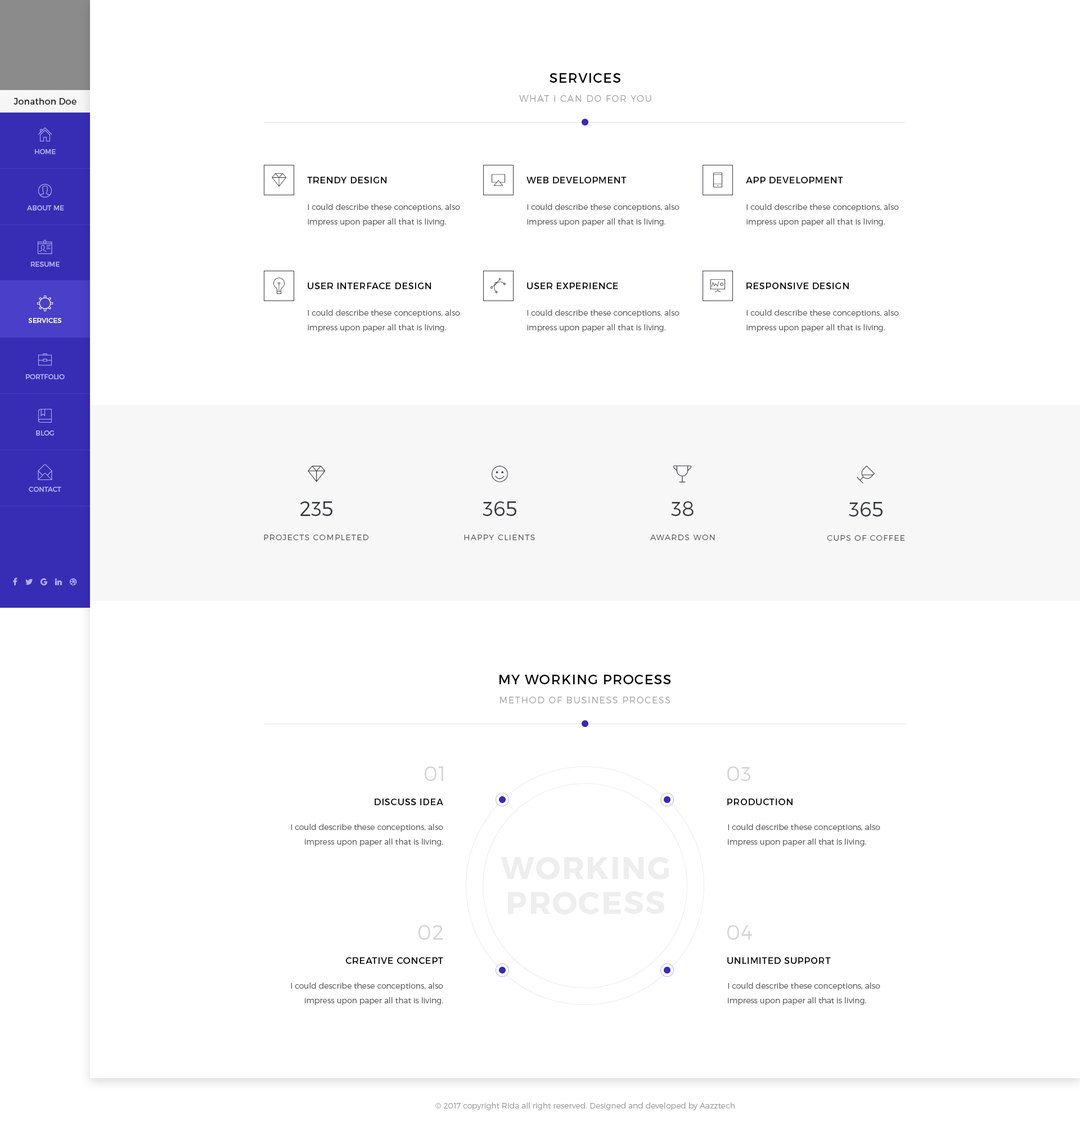
<style>
.page{position:relative;width:1080px;height:1135px;background:#ffffff}
.page>*{position:absolute;margin:0}
.t1{font:13.5px "Montserrat-Regular";letter-spacing:0.05em;color:#000000;text-transform:uppercase}
.t2{font:9px "Montserrat-Regular";color:#2a2a2a}
.t3{font:9px "Montserrat-Light";letter-spacing:0.1em;color:#a8a8a8;text-transform:uppercase}
.t4{font:6.8px "Montserrat-Regular";color:#b5b0f7;text-transform:uppercase}
.t5{font:9px "Montserrat-Regular";letter-spacing:0.05em;color:#000000}
.t6{font:9px "Montserrat-Regular";letter-spacing:0.05em;color:#000000;text-transform:uppercase}
.t7{font:7.9px/14.6px "Montserrat-Light";color:#5a5a5a}
.t8{font:6.8px "Montserrat-Regular";color:#ffffff;text-transform:uppercase}
.t9{font:20.2px "Montserrat-Light";color:#35373e;text-transform:uppercase}
.t10{font:7.9px "Montserrat-Light";letter-spacing:0.1em;color:#5e5e5e;text-transform:uppercase}
.t11{font:20.2px "Montserrat-Light";letter-spacing:0.05em;color:#d4d4d4;text-transform:uppercase}
.t12{font:30.9px/34.9px "Montserrat-Bold";letter-spacing:0.05em;color:#eeeeee;text-transform:uppercase}
.t13{font:7.9px "Montserrat-Light";color:#9f9f9f}
</style>
<div class="page">
<p class="t1" style="left:550px;top:73px;width:70px;height:10px">services</p>
<p class="t2" style="left:14px;top:98px;width:62px;height:7px">Jonathon Doe</p>
<p class="t3" style="left:519px;top:95px;width:132px;height:7px">what i can do for you</p>
<p class="t4" style="left:35px;top:149px;width:21px;height:5px">HOME</p>
<p class="t5" style="left:307px;top:177px;width:80px;height:6px">TRENDY DESIGN</p>
<p class="t6" style="left:526px;top:177px;width:101px;height:6px">web development</p>
<p class="t6" style="left:746px;top:177px;width:97px;height:6px">app development</p>
<p class="t4" style="left:27px;top:205px;width:37px;height:5px">about me</p>
<p class="t7" style="left:308px;top:204px;width:152px;height:22px">I could describe these conceptions, also impress upon paper all that is living.</p>
<p class="t7" style="left:527px;top:204px;width:153px;height:22px">I could describe these conceptions, also impress upon paper all that is living.</p>
<p class="t7" style="left:746px;top:204px;width:153px;height:22px">I could describe these conceptions, also impress upon paper all that is living.</p>
<p class="t4" style="left:31px;top:262px;width:29px;height:5px">resume</p>
<p class="t6" style="left:308px;top:282px;width:123px;height:7px">user interface design</p>
<p class="t6" style="left:527px;top:282px;width:91px;height:7px">user experience</p>
<p class="t6" style="left:746px;top:282px;width:103px;height:7px">responsive design</p>
<p class="t8" style="left:28px;top:318px;width:33px;height:5px">services</p>
<p class="t7" style="left:308px;top:309px;width:152px;height:23px">I could describe these conceptions, also impress upon paper all that is living.</p>
<p class="t7" style="left:527px;top:309px;width:153px;height:23px">I could describe these conceptions, also impress upon paper all that is living.</p>
<p class="t7" style="left:746px;top:309px;width:153px;height:23px">I could describe these conceptions, also impress upon paper all that is living.</p>
<p class="t4" style="left:26px;top:374px;width:39px;height:5px">portfolio</p>
<p class="t4" style="left:36px;top:430px;width:18px;height:5px">blog</p>
<p class="t4" style="left:29px;top:487px;width:32px;height:5px">contact</p>
<p class="t9" style="left:300px;top:501px;width:32px;height:15px">235</p>
<p class="t9" style="left:483px;top:501px;width:33px;height:15px">365</p>
<p class="t9" style="left:671px;top:501px;width:23px;height:15px">38</p>
<p class="t9" style="left:849px;top:502px;width:34px;height:14px">365</p>
<p class="t10" style="left:264px;top:534px;width:104px;height:6px">Projects completed</p>
<p class="t10" style="left:464px;top:534px;width:71px;height:6px">HAPPY CLIENTS</p>
<p class="t10" style="left:650px;top:534px;width:65px;height:6px">AWARDS WON</p>
<p class="t10" style="left:827px;top:535px;width:78px;height:6px">CUPS OF COFFEE</p>
<p class="t1" style="left:500px;top:674px;width:171px;height:10px">my WORKING PROCESS</p>
<p class="t3" style="left:500px;top:696px;width:170px;height:7px">METHOD OF BUSINESS PROCESS</p>
<p class="t11" style="left:425px;top:766px;width:18px;height:15px">01</p>
<p class="t11" style="left:727px;top:766px;width:23px;height:15px">03</p>
<p class="t6" style="left:375px;top:798px;width:68px;height:7px">DISCUSS IDEA</p>
<p class="t6" style="left:727px;top:798px;width:66px;height:7px">PRODUCTION</p>
<p class="t7" style="left:291px;top:824px;width:152px;height:22px;text-align:right">I could describe these conceptions, also impress upon paper all that is living.</p>
<p class="t7" style="left:728px;top:824px;width:152px;height:22px">I could describe these conceptions, also impress upon paper all that is living.</p>
<p class="t12" style="left:501px;top:857px;width:168px;height:57px;text-align:center">WORKING<br>PROCESS</p>
<p class="t11" style="left:418px;top:925px;width:25px;height:14px">02</p>
<p class="t11" style="left:727px;top:925px;width:25px;height:14px">04</p>
<p class="t6" style="left:345px;top:957px;width:98px;height:7px">CREATIVE CONCEPT</p>
<p class="t6" style="left:727px;top:957px;width:104px;height:7px">unlimited support</p>
<p class="t7" style="left:291px;top:982px;width:152px;height:23px;text-align:right">I could describe these conceptions, also impress upon paper all that is living.</p>
<p class="t7" style="left:728px;top:982px;width:152px;height:23px">I could describe these conceptions, also impress upon paper all that is living.</p>
<p class="t13" style="left:435px;top:1102px;width:300px;height:8px">© 2017 copyright Rida all right reserved. Designed and developed by Aazztech</p>
</div>
